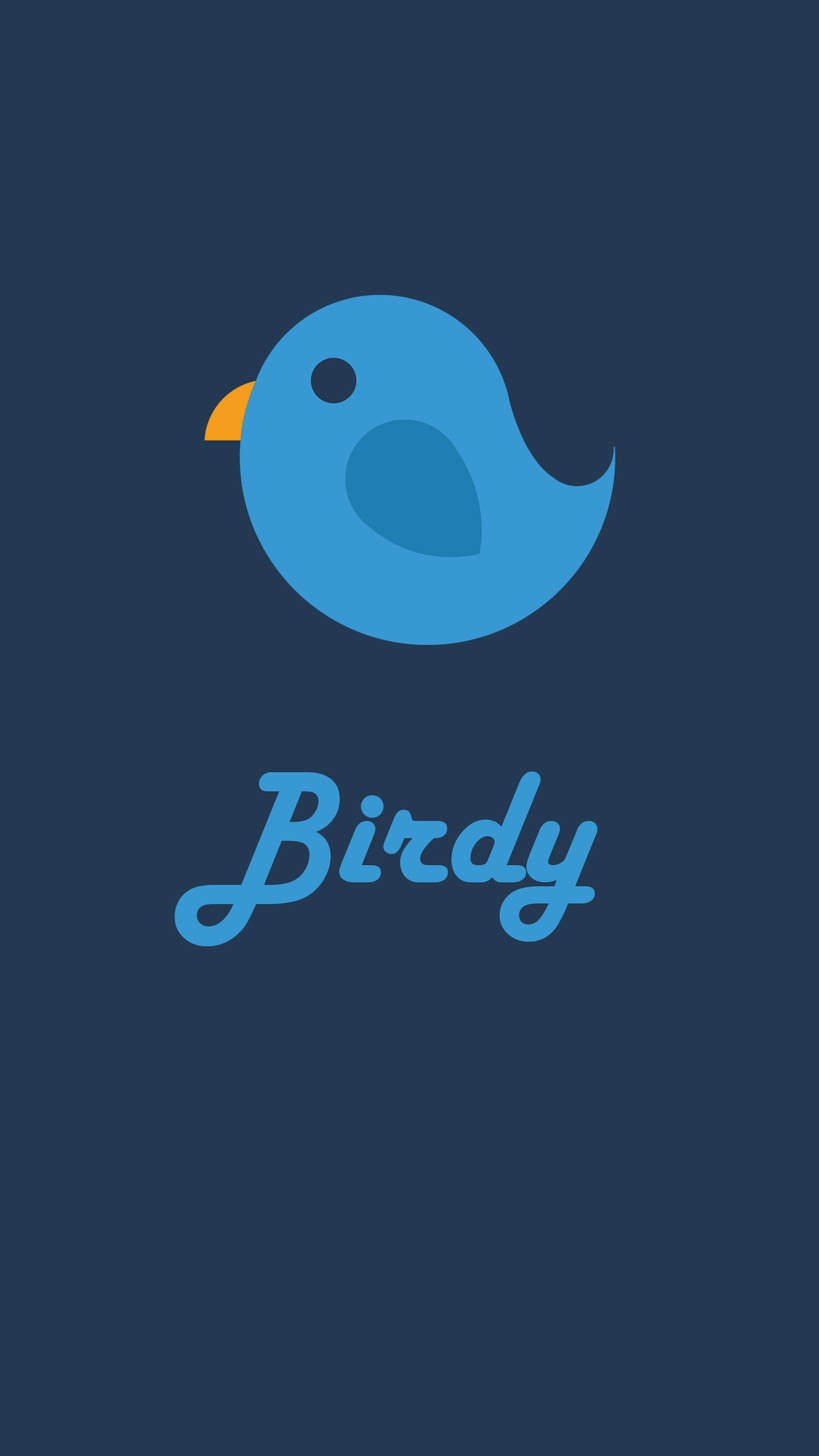
<style>
.page{position:relative;width:819px;height:1456px;background:#233951}
.page>*{position:absolute;margin:0}
.t1{font:164.9px "HarlowSolid";color:#3798d3}
</style>
<div class="page">
<p class="t1" style="left:174px;top:772px;width:423px;height:174px">Birdy</p>
</div>
